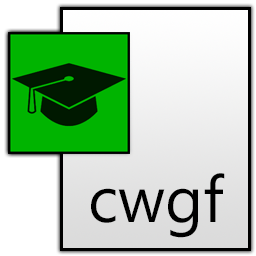
<style>
.page{position:relative;width:256px;height:256px}
.page>*{position:absolute;margin:0}
.t1{font:65px "SegoeUI";color:#000000}
</style>
<div class="page">
<p class="t1" style="left:91px;top:173px;width:134px;height:65px">cwgf</p>
</div>
